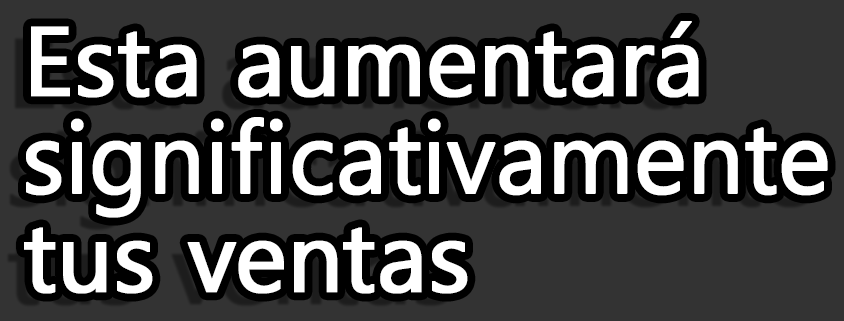
<style>
.page{position:relative;width:844px;height:321px;background:#333333}
.page>*{position:absolute;margin:0}
.t1{font:100px/97.8px "Gadugi";letter-spacing:0.005em;color:#ffffff;font-weight:bold}
.t2{font:97.8px/97.8px "Gadugi";letter-spacing:0.005em;color:#ffffff;font-weight:bold}
</style>
<div class="page">
<p class="t1" style="left:24px;top:21px;width:804px;height:273px"><span class="t2">Esta aumentará<br></span>significativamente<br><span class="t2">tus ventas</span></p>
</div>
